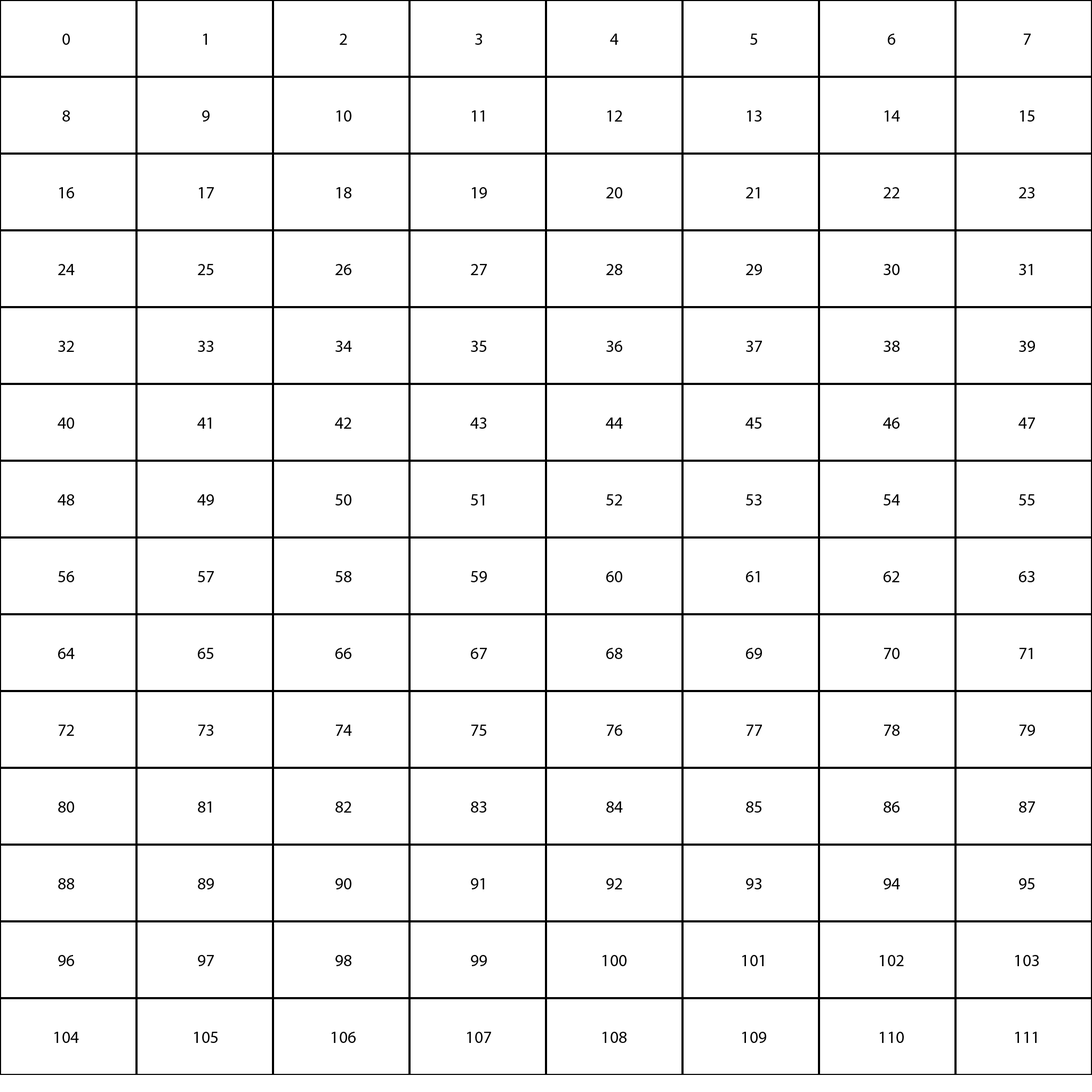
<style>
.page{position:relative;width:1092px;height:1092px;background:#ffffff}
.page>*{position:absolute;margin:0}
.t1{font:17.1px/76.8px "MyriadPro-Regular";color:#000000}
</style>
<div class="page">
<p class="t1" style="left:54px;top:34px;width:25px;height:1009px;text-align:center">0<br>8<br>16<br>24<br>32<br>40<br>48<br>56<br>64<br>72<br>80<br>88<br>96<br>104</p>
<p class="t1" style="left:194px;top:34px;width:24px;height:1009px;text-align:center">1<br>9<br>17<br>25<br>33<br>41<br>49<br>57<br>65<br>73<br>81<br>89<br>97<br>105</p>
<p class="t1" style="left:332px;top:34px;width:24px;height:1009px;text-align:center">2<br>10<br>18<br>26<br>34<br>42<br>50<br>58<br>66<br>74<br>82<br>90<br>98<br>106</p>
<p class="t1" style="left:467px;top:34px;width:24px;height:1009px;text-align:center">3<br>11<br>19<br>27<br>35<br>43<br>51<br>59<br>67<br>75<br>83<br>91<br>99<br>107</p>
<p class="t1" style="left:603px;top:34px;width:24px;height:1009px;text-align:center">4<br>12<br>20<br>28<br>36<br>44<br>52<br>60<br>68<br>76<br>84<br>92<br>100<br>108</p>
<p class="t1" style="left:742px;top:34px;width:24px;height:1009px;text-align:center">5<br>13<br>21<br>29<br>37<br>45<br>53<br>61<br>69<br>77<br>85<br>93<br>101<br>109</p>
<p class="t1" style="left:880px;top:34px;width:24px;height:1009px;text-align:center">6<br>14<br>22<br>30<br>38<br>46<br>54<br>62<br>70<br>78<br>86<br>94<br>102<br>110</p>
<p class="t1" style="left:1015px;top:34px;width:24px;height:1009px;text-align:center">7<br>15<br>23<br>31<br>39<br>47<br>55<br>63<br>71<br>79<br>87<br>95<br>103<br>111</p>
</div>
